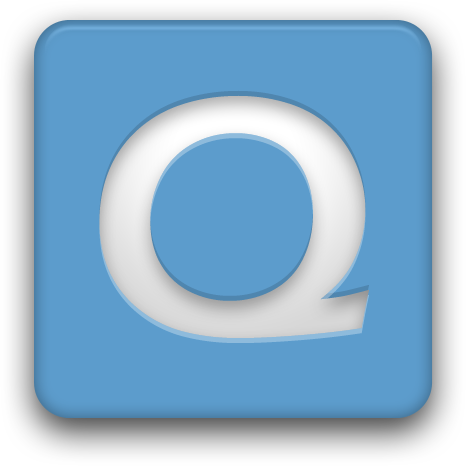
<style>
.page{position:relative;width:466px;height:466px;background:#5c9ccc}
.page>*{position:absolute;margin:0}
.t1{font:351px "ErasITC-Demi"}
</style>
<div class="page">
<p class="t1" style="left:99px;top:95px;width:270px;height:243px">Q</p>
<p class="t1" style="left:99px;top:95px;width:270px;height:243px">Q</p>
</div>
